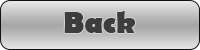
<style>
.page{position:relative;width:200px;height:50px}
.page>*{position:absolute;margin:0}
.t1{font:30px "BerlinSansFB-Bold";color:#3d3d3d}
</style>
<div class="page">
<p class="t1" style="left:64px;top:11px;width:72px;height:22px">Back</p>
</div>
